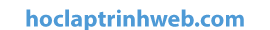
<style>
.page{position:relative;width:270px;height:30px;background:#ffffff}
.page>*{position:absolute;margin:0}
.t1{font:24px "MyriadPro-Bold";color:#4e9ad6}
</style>
<div class="page">
<p class="t1" style="left:26px;top:9px;width:218px;height:23px">hoclaptrinhweb.com</p>
</div>
